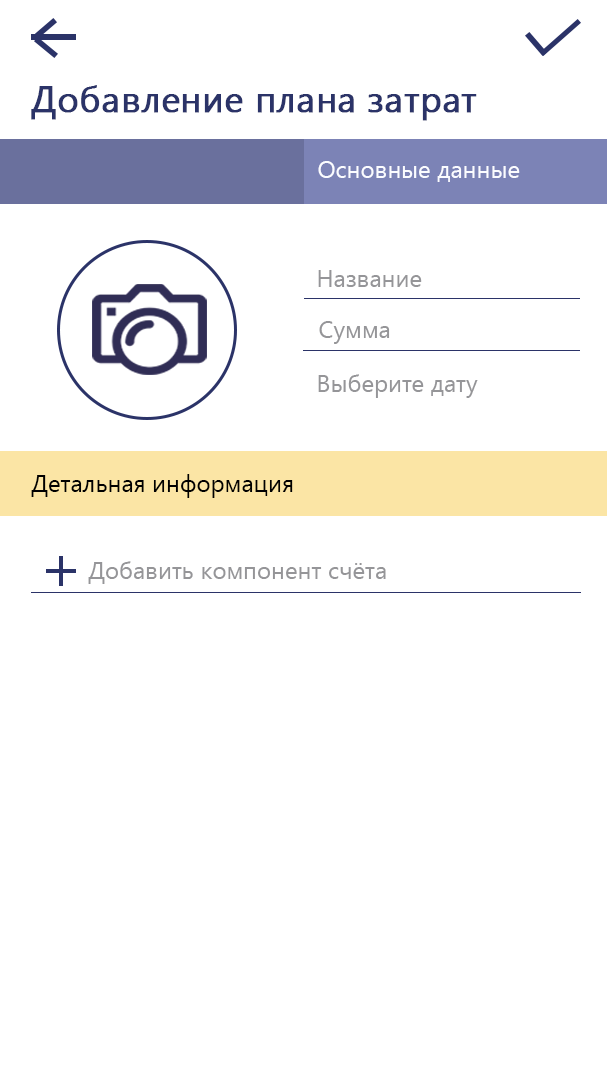
<style>
.page{position:relative;width:607px;height:1080px;background:#ffffff}
.page>*{position:absolute;margin:0}
.t1{font:36px "YuGothicUI-Regular";color:#2b3368;font-weight:bold}
.t2{font:24px "YuGothicUI-Regular";color:#fbfcff}
.t3{font:24px "YuGothicUI-Regular";color:#959598}
.t4{font:24px "YuGothicUI-Regular";color:#000000}
</style>
<div class="page">
<p class="t1" style="left:31px;top:85px;width:446px;height:36px">Добавление плана затрат</p>
<p class="t2" style="left:318px;top:161px;width:202px;height:21px">Основные данные</p>
<p class="t3" style="left:318px;top:270px;width:104px;height:17px">Название</p>
<p class="t3" style="left:319px;top:321px;width:71px;height:23px">Сумма</p>
<p class="t3" style="left:318px;top:374px;width:160px;height:24px">Выберите дату</p>
<p class="t4" style="left:31px;top:474px;width:262px;height:24px">Детальная информация</p>
<p class="t3" style="left:88px;top:561px;width:298px;height:23px">Добавить компонент счёта</p>
</div>
